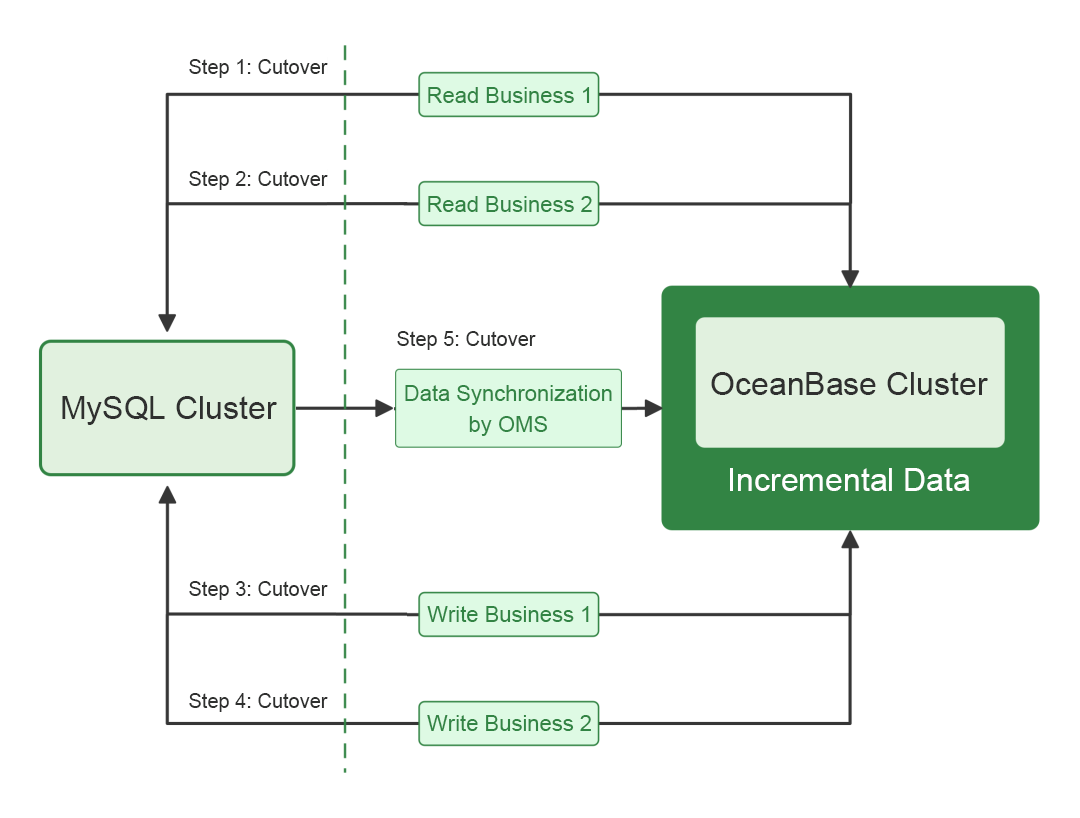
<style>
.page{position:relative;width:1080px;height:818px;background:#ffffff}
.page>*{position:absolute;margin:0}
.t1{font:20px "ArialMT";color:#2f302f}
.t2{font:22px "ArialMT";color:#328444}
.t3{font:32px "ArialMT";color:#2f302f}
.t4{font:22px/31px "ArialMT";color:#328444}
.t5{font:32px "ArialMT";color:#ffffff}
</style>
<div class="page">
<p class="t1" style="left:189px;top:59px;width:139px;height:19px">Step 1: Cutover</p>
<p class="t2" style="left:428px;top:87px;width:162px;height:16px">Read Business 1</p>
<p class="t1" style="left:189px;top:171px;width:139px;height:19px">Step 2: Cutover</p>
<p class="t2" style="left:428px;top:196px;width:164px;height:16px">Read Business 2</p>
<p class="t1" style="left:397px;top:331px;width:139px;height:19px">Step 5: Cutover</p>
<p class="t3" style="left:711px;top:372px;width:277px;height:23px">OceanBase Cluster</p>
<p class="t4" style="left:405px;top:385px;width:207px;height:51px;text-align:center">Data Synchronization by OMS</p>
<p class="t3" style="left:62px;top:396px;width:215px;height:29px">MySQL Cluster</p>
<p class="t5" style="left:730px;top:468px;width:240px;height:23px">Incremental Data</p>
<p class="t1" style="left:189px;top:581px;width:139px;height:19px">Step 3: Cutover</p>
<p class="t2" style="left:427px;top:606px;width:162px;height:16px">Write Business 1</p>
<p class="t1" style="left:189px;top:693px;width:139px;height:19px">Step 4: Cutover</p>
<p class="t2" style="left:427px;top:715px;width:164px;height:16px">Write Business 2</p>
</div>
